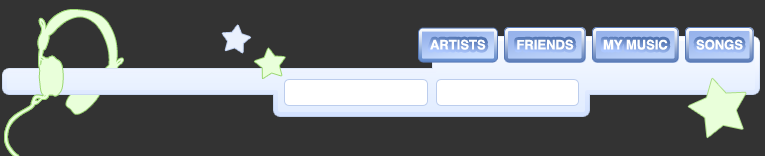
<style>
.page{position:relative;width:765px;height:156px;background:#333333}
.page>*{position:absolute;margin:0}
.t1{font:13px "Helvetica-Bold";color:#ffffff}
</style>
<div class="page">
<p class="t1" style="left:430px;top:39px;width:56px;height:11px">ARTISTS</p>
<p class="t1" style="left:517px;top:39px;width:57px;height:11px">FRIENDS</p>
<p class="t1" style="left:603px;top:39px;width:65px;height:11px">MY MUSIC</p>
<p class="t1" style="left:696px;top:39px;width:47px;height:11px">SONGS</p>
</div>
